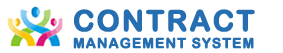
<style>
.page{position:relative;width:283px;height:53px;background:#ffffff}
.page>*{position:absolute;margin:0}
.t1{font:14px/30px "ArialRoundedMTBold";letter-spacing:0.05em;color:#256eb1;text-transform:uppercase;font-weight:bold}
.t2{font:29px/30px "ArialRoundedMTBold";letter-spacing:0.05em;color:#256eb1;text-transform:uppercase;font-weight:bold}
</style>
<div class="page">
<p class="t1" style="left:73px;top:9px;width:182px;height:40px"><span class="t2">Contract<br></span>Management System</p>
</div>
